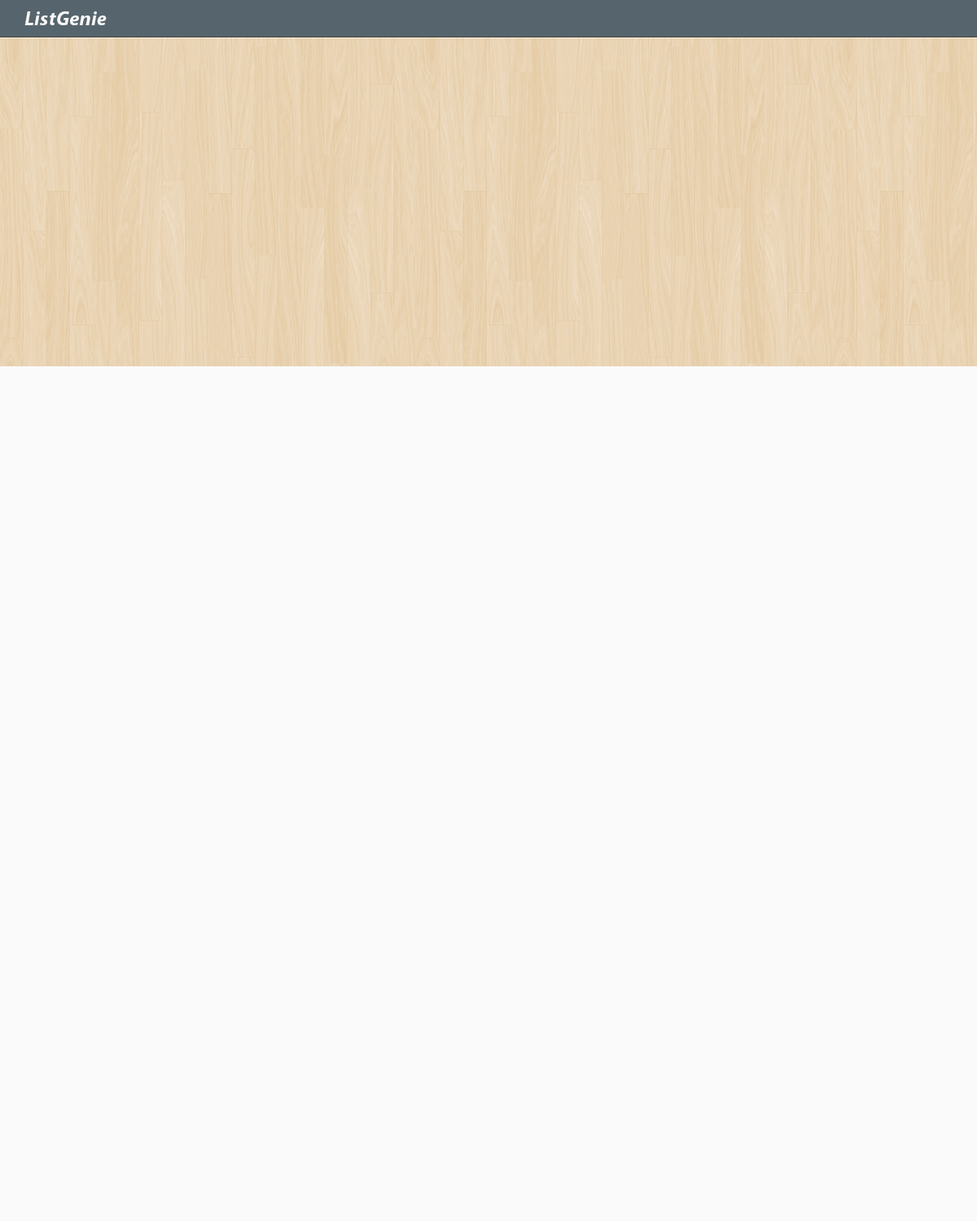
<style>
.page{position:relative;width:977px;height:1221px;background:#fafafa}
.page>*{position:absolute;margin:0}
.t1{font:19.5px "MyriadPro-BoldIt";letter-spacing:0.025em;color:#f9f9f9}
</style>
<div class="page">
<p class="t1" style="left:24px;top:11px;width:83px;height:14px">ListGenie</p>
</div>
